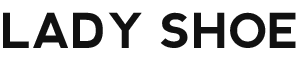
<style>
.page{position:relative;width:300px;height:60px;background:#ffffff}
.page>*{position:absolute;margin:0}
.t1{font:48px "nevis-Bold";color:#111111}
</style>
<div class="page">
<p class="t1" style="left:3px;top:12px;width:293px;height:36px">LADY SHOE</p>
</div>
